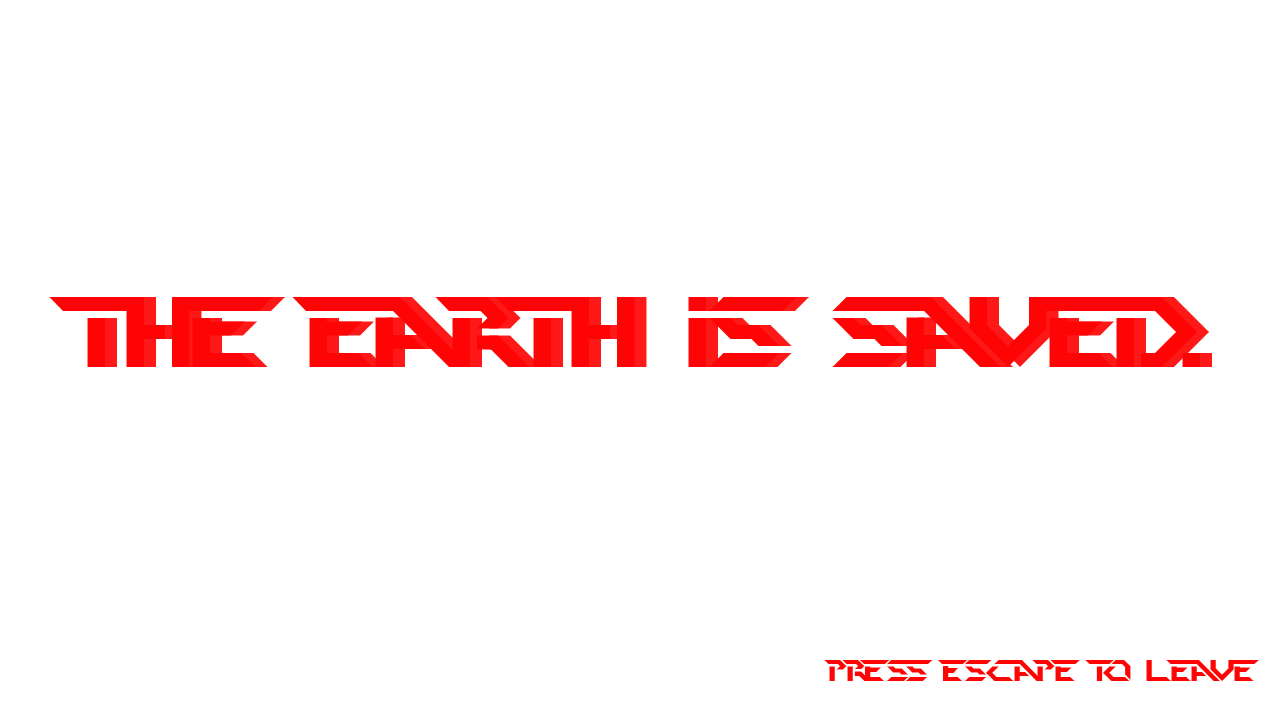
<style>
.page{position:relative;width:1280px;height:720px;background:#ffffff}
.page>*{position:absolute;margin:0}
.t1{font:100px "PerfectDark(BRK)";color:#ff0404}
.t2{font:30px "PerfectDark(BRK)";color:#ff0404}
</style>
<div class="page">
<p class="t1" style="left:49px;top:297px;width:1151px;height:70px">the earth is saved.</p>
<p class="t1" style="left:61px;top:297px;width:1151px;height:70px;opacity:0.92">the earth is saved.</p>
<p class="t2" style="left:824px;top:660px;width:435px;height:21px">Press Escape to leave</p>
</div>
